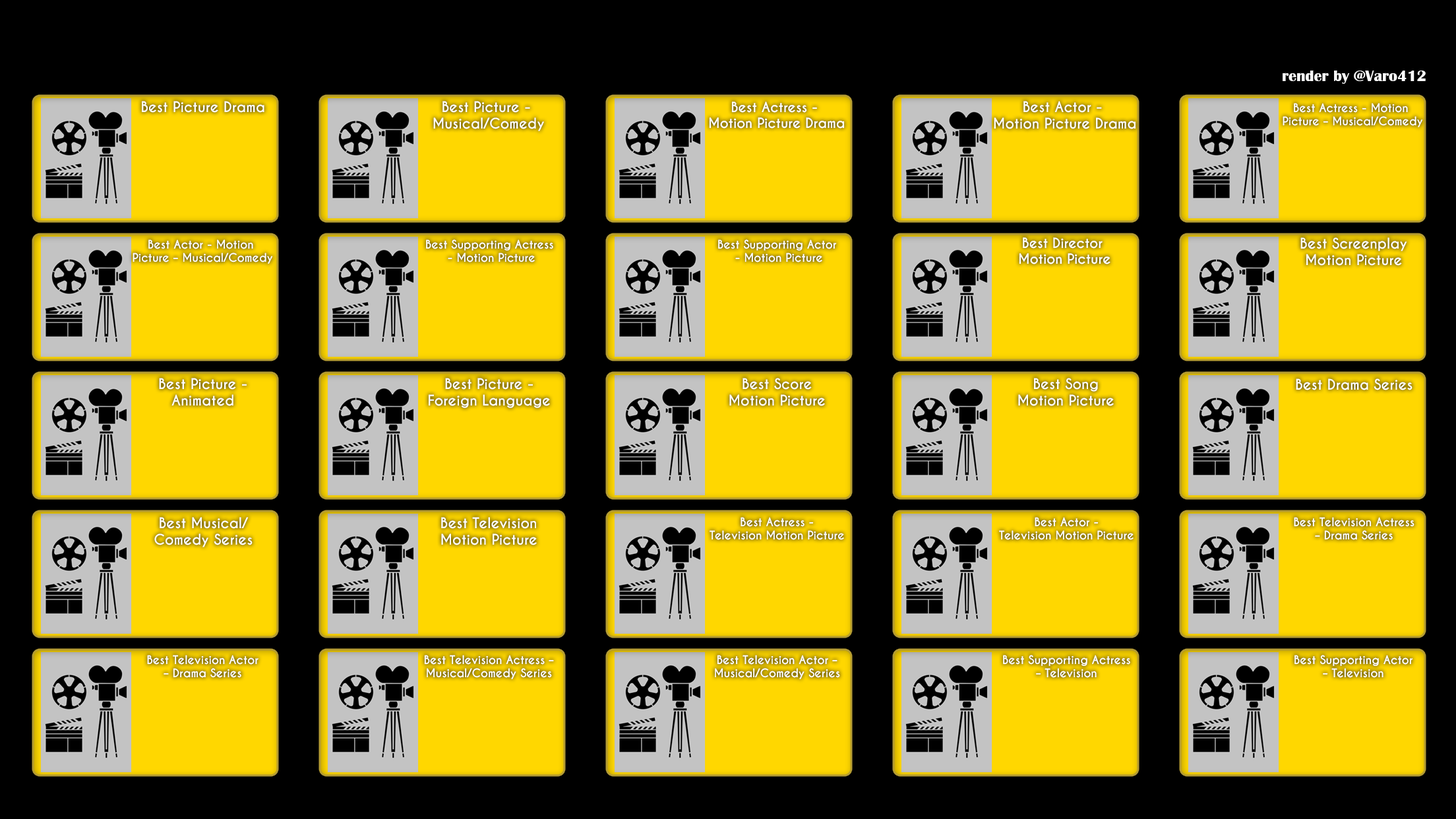
<style>
.page{position:relative;width:1456px;height:819px;background:#000000}
.page>*{position:absolute;margin:0}
.t1{font:15.8px "BritannicBold";color:#ffffff}
.t2{font:13.8px "CaviarDreams-Bold";color:#ffffff}
.t3{font:13.2px "CaviarDreams-Bold";color:#ffffff}
.t4{font:11.2px "CaviarDreams-Bold";color:#ffffff}
</style>
<div class="page">
<p class="t1" style="left:1283px;top:70px;width:143px;height:14px">render by @Varo412</p>
<p class="t2" style="left:142px;top:101px;width:122px;height:12px">Best Picture Drama</p>
<p class="t2" style="left:433px;top:101px;width:111px;height:30px;text-align:center">Best Picture - <br>Musical/Comedy</p>
<p class="t3" style="left:709px;top:102px;width:136px;height:27px;text-align:center">Best Actress - <br>Motion Picture Drama</p>
<p class="t2" style="left:994px;top:101px;width:142px;height:28px;text-align:center">Best Actor - <br>Motion Picture Drama</p>
<p class="t4" style="left:1283px;top:103px;width:140px;height:24px;text-align:center">Best Actress - Motion <br>Picture – Musical/Comedy</p>
<p class="t4" style="left:133px;top:239px;width:140px;height:25px;text-align:center">Best Actor - Motion <br>Picture – Musical/Comedy</p>
<p class="t4" style="left:426px;top:239px;width:127px;height:23px;text-align:center">Best Supporting Actress<br> - Motion Picture</p>
<p class="t4" style="left:718px;top:239px;width:119px;height:23px;text-align:center">Best Supporting Actor<br> - Motion Picture</p>
<p class="t3" style="left:1019px;top:237px;width:91px;height:27px;text-align:center">Best Director <br>Motion Picture</p>
<p class="t2" style="left:1300px;top:237px;width:107px;height:29px;text-align:center">Best Screenplay<br>Motion Picture</p>
<p class="t2" style="left:159px;top:378px;width:88px;height:28px;text-align:center">Best Picture -<br>Animated</p>
<p class="t2" style="left:429px;top:378px;width:121px;height:30px;text-align:center">Best Picture -<br>Foreign Language</p>
<p class="t2" style="left:729px;top:378px;width:96px;height:28px;text-align:center">Best Score<br>Motion Picture</p>
<p class="t2" style="left:1018px;top:378px;width:96px;height:28px;text-align:center">Best Song<br>Motion Picture</p>
<p class="t2" style="left:1296px;top:379px;width:116px;height:11px">Best Drama Series</p>
<p class="t2" style="left:154px;top:517px;width:99px;height:30px;text-align:center">Best Musical/<br>Comedy Series</p>
<p class="t2" style="left:441px;top:517px;width:96px;height:28px;text-align:center">Best Television<br>Motion Picture</p>
<p class="t4" style="left:710px;top:517px;width:134px;height:23px;text-align:center">Best Actress -<br>Television Motion Picture</p>
<p class="t4" style="left:999px;top:517px;width:135px;height:23px;text-align:center">Best Actor -<br>Television Motion Picture</p>
<p class="t4" style="left:1294px;top:517px;width:120px;height:23px;text-align:center">Best Television Actress<br>– Drama Series</p>
<p class="t4" style="left:147px;top:655px;width:111px;height:23px;text-align:center">Best Television Actor<br>– Drama Series</p>
<p class="t4" style="left:424px;top:655px;width:130px;height:24px;text-align:center">Best Television Actress –<br>Musical/Comedy Series</p>
<p class="t4" style="left:715px;top:655px;width:125px;height:24px;text-align:center">Best Television Actor –<br>Musical/Comedy Series</p>
<p class="t4" style="left:1003px;top:655px;width:127px;height:23px;text-align:center">Best Supporting Actress<br>– Television</p>
<p class="t4" style="left:1294px;top:655px;width:119px;height:23px;text-align:center">Best Supporting Actor<br>– Television</p>
</div>
